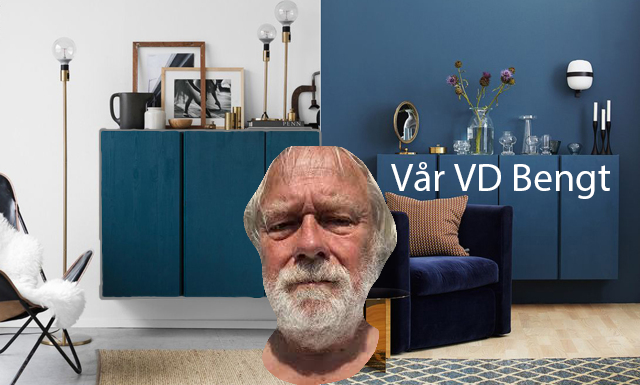
<style>
.page{position:relative;width:640px;height:385px}
.page>*{position:absolute;margin:0}
.t1{font:40px "MyriadPro-Regular";color:#ffffff}
</style>
<div class="page">
<p class="t1" style="left:391px;top:162px;width:219px;height:37px">Vår VD Bengt</p>
</div>
